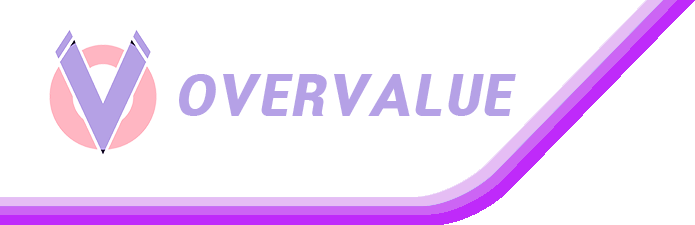
<style>
.page{position:relative;width:695px;height:225px;background:#ffffff}
.page>*{position:absolute;margin:0}
.t1{font:48px "HeadlineR-HM";color:#b5a1e6;font-style:italic}
</style>
<div class="page">
<p class="t1" style="left:179px;top:74px;width:337px;height:42px">OVERVALUE</p>
</div>
